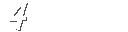
<style>
.page{position:relative;width:128px;height:32px;background:#ffffff}
.page>*{position:absolute;margin:0}
.t1{font:43px "DomDiagonalBT-Regular";letter-spacing:0.075em;color:#ffffff;scale:1.05 1}
</style>
<div class="page">
<p class="t1" style="left:8px;top:2px;width:20px;height:29px">4</p>
</div>
